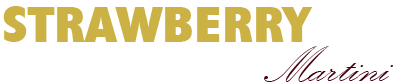
<style>
.page{position:relative;width:407px;height:84px;background:#ffffff}
.page>*{position:absolute;margin:0}
.t1{font:51.3px "Humanist521BT-XtraBoldCondensed";color:#ccb245;scale:1.05 1}
.t2{font:52.2px "KunstlerScript";color:#460010;scale:1.05 1}
</style>
<div class="page">
<p class="t1" style="left:3px;top:6px;width:310px;height:36px">STRAWBERRY</p>
<p class="t2" style="left:264px;top:46px;width:129px;height:36px">Martini</p>
</div>
